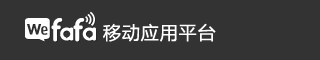
<style>
.page{position:relative;width:320px;height:60px;background:#333333}
.page>*{position:absolute;margin:0}
.t1{font:18px "MicrosoftYaHei";letter-spacing:0.05em;color:#ffffff}
</style>
<div class="page">
<p class="t1" style="left:103px;top:23px;width:113px;height:19px">移动应用平台</p>
</div>
